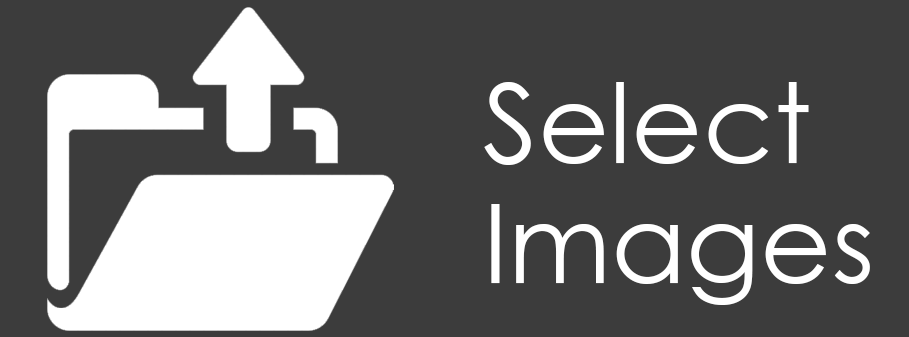
<style>
.page{position:relative;width:909px;height:337px;background:#3c3c3c}
.page>*{position:absolute;margin:0}
.t1{font:110px/120px "CenturyGothic";color:#ffffff}
</style>
<div class="page">
<p class="t1" style="left:484px;top:82px;width:386px;height:223px">Select <br>Images</p>
</div>
